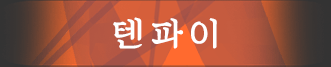
<style>
.page{position:relative;width:331px;height:67px}
.page>*{position:absolute;margin:0}
.t1{font:35px "SDKukdetopokki-aLt";letter-spacing:0.18em;color:#ffffff}
.t2{font:35px "SDKukdetopokki-aLt";letter-spacing:0.14em;color:#ffffff}
</style>
<div class="page">
<p class="t1" style="left:113px;top:17px;width:104px;height:32px">텐<span class="t2">파</span>이</p>
</div>
